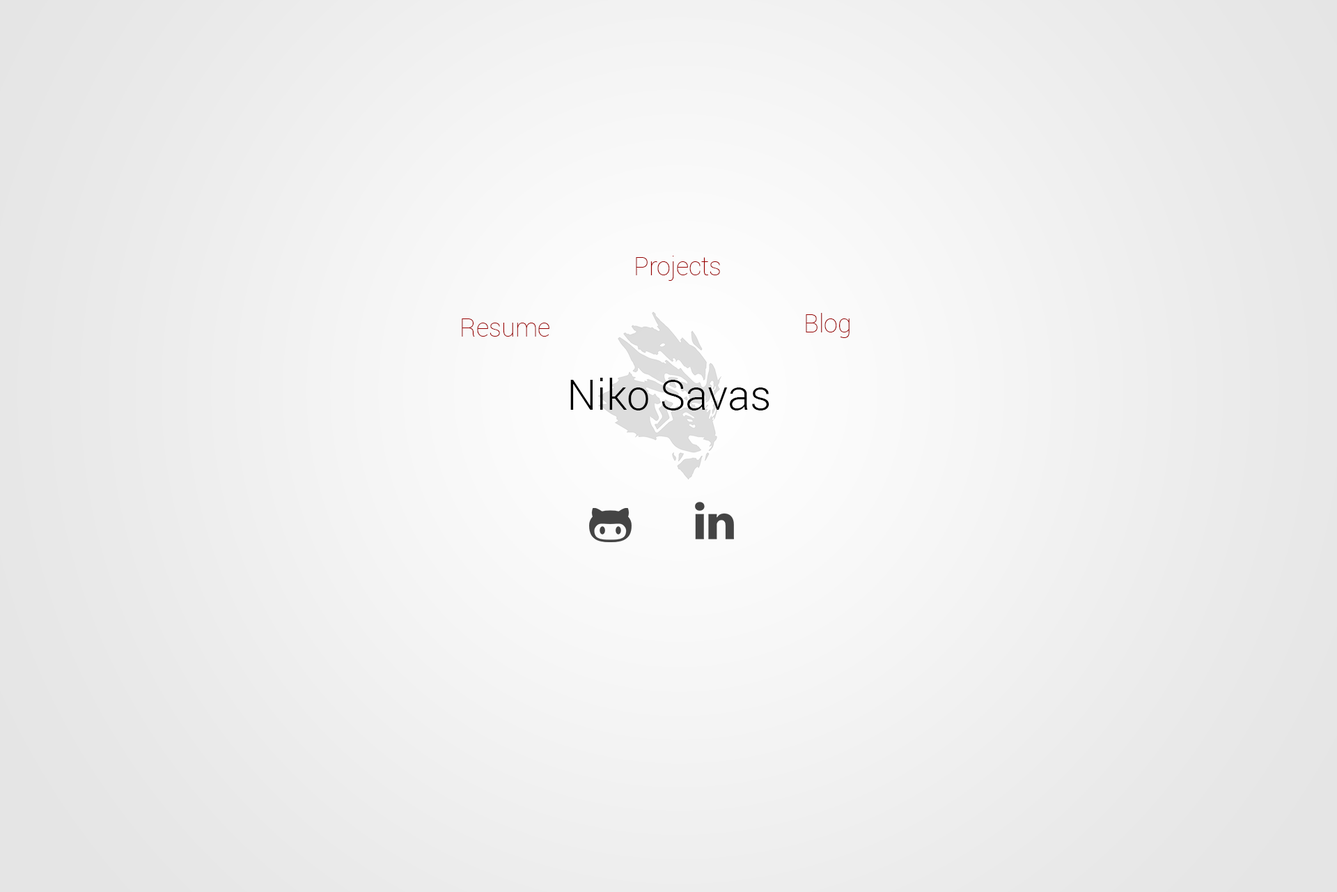
<style>
.page{position:relative;width:1337px;height:892px}
.page>*{position:absolute;margin:0}
.t1{font:25.1px "Roboto-Thin";color:#990000}
.t2{font:41.8px "Roboto-Light";color:#000000}
</style>
<div class="page">
<p class="t1" style="left:636px;top:256px;width:84px;height:25px">Projects</p>
<p class="t1" style="left:806px;top:313px;width:44px;height:25px">Blog</p>
<p class="t1" style="left:462px;top:318px;width:88px;height:18px">Resume</p>
<p class="t2" style="left:570px;top:378px;width:200px;height:32px">Niko Savas</p>
</div>
